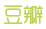
<style>
.page{position:relative;width:46px;height:29px;background:#ffffff}
.page>*{position:absolute;margin:0}
.t1{font:20px "RTWSYueGoTrial-Regular";color:#bad455}
</style>
<div class="page">
<p class="t1" style="left:4px;top:5px;width:39px;height:19px">豆瓣</p>
</div>
